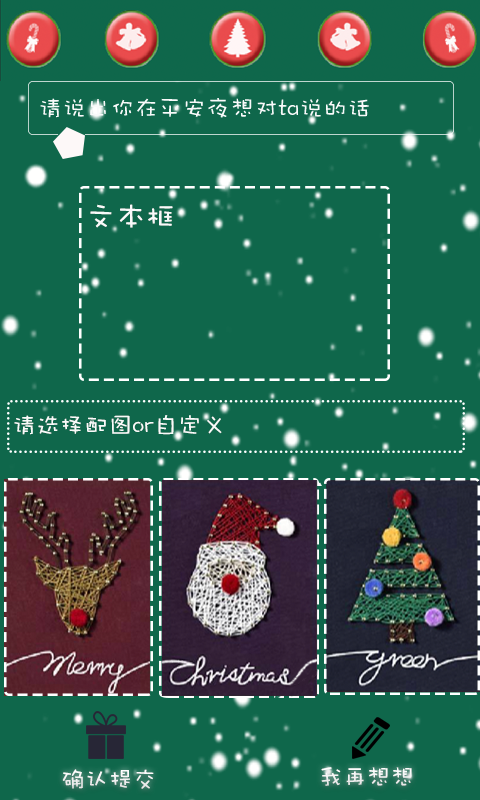
<style>
.page{position:relative;width:480px;height:800px;background:#0f674b}
.page>*{position:absolute;margin:0}
.t1{font:30px "DFWaWaSC-W5";color:#f9fafa}
.t2{font:24px "DFWaWaSC-W5";color:#f9fbfa}
</style>
<div class="page">
<p class="t1" style="left:90px;top:204px;width:83px;height:24px">文本框</p>
<p class="t2" style="left:14px;top:415px;width:208px;height:20px">请选择配图or自定义</p>
<p class="t2" style="left:62px;top:769px;width:92px;height:20px">确认提交</p>
<p class="t2" style="left:321px;top:767px;width:91px;height:19px">我再想想</p>
</div>
